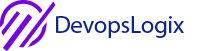
<style>
.page{position:relative;width:198px;height:51px;background:#ffffff}
.page>*{position:absolute;margin:0}
.t1{font:24px "MyriadPro-Regular";color:#0d248b}
</style>
<div class="page">
<p class="t1" style="left:56px;top:16px;width:128px;height:22px">DevopsLogix</p>
</div>
